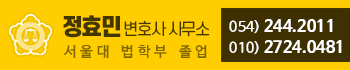
<style>
.page{position:relative;width:350px;height:70px;background:#ffcd00}
.page>*{position:absolute;margin:0}
.t1{font:16px "S-CoreDream-4Regular";letter-spacing:-0.1em;color:#433600}
.t2{font:22px "S-CoreDream-9Black";letter-spacing:-0.075em;color:#433600}
.t3{font:16px/21px "NanumBarunGothicOTFBold";letter-spacing:0.01em;color:#ffffff}
.t4{font:14px/18px "NanumBarunGothicOTF";letter-spacing:0.01em;color:#ffffff}
.t5{font:14px/21px "NanumBarunGothicOTF";letter-spacing:0.01em;color:#ffffff}
.t6{font:14px "NanumBarunGothicOTF";letter-spacing:0.3em;color:#806700}
</style>
<div class="page">
<p class="t1" style="left:63px;top:15px;width:147px;height:23px"><span class="t2">정효민 </span>변호사 사무소</p>
<p class="t3" style="left:229px;top:19px;width:113px;height:36px"><span class="t4">054) </span>244.2011<br><span class="t5">010) </span>2724.0481</p>
<p class="t6" style="left:63px;top:45px;width:144px;height:13px">서울대 법학부 졸업</p>
</div>
